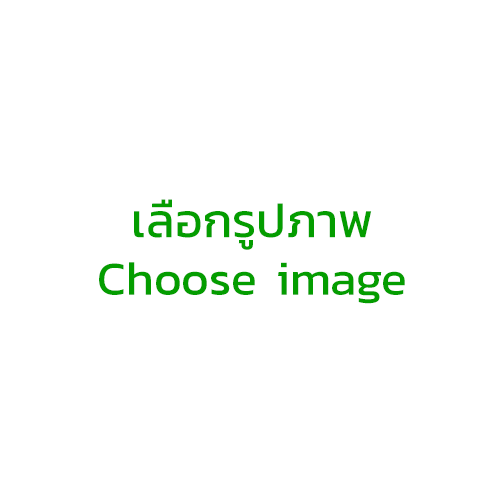
<style>
.page{position:relative;width:500px;height:500px;background:#ffffff}
.page>*{position:absolute;margin:0}
.t1{font:48px "Kanit-Regular";color:#049d00}
</style>
<div class="page">
<p class="t1" style="left:99px;top:199px;width:306px;height:105px;text-align:center">เลือกรูปภาพ<br>Choose image</p>
</div>
